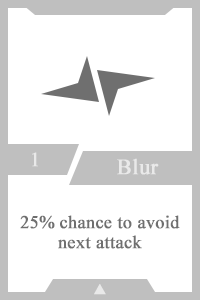
<style>
.page{position:relative;width:200px;height:300px;background:#ffffff}
.page>*{position:absolute;margin:0}
.t1{font:20px "TimesNewRomanPSMT";color:#e9e9e9;font-weight:bold}
.t2{font:22px "TimesNewRomanPSMT";color:#e9e9e9;font-weight:bold}
.t3{font:18px/20px "TimesNewRomanPSMT";color:#6f6f6f;font-weight:bold}
.t4{font:14px "AdobeHeitiStd-Regular";color:#e9e9e9;font-weight:bold}
</style>
<div class="page">
<p class="t1" style="left:32px;top:152px;width:6px;height:15px">1</p>
<p class="t2" style="left:117px;top:158px;width:42px;height:17px">Blur</p>
<p class="t3" style="left:20px;top:215px;width:160px;height:34px;text-align:center">25% chance to avoid next attack</p>
<p class="t4" style="left:94px;top:284px;width:12px;height:11px">▲</p>
</div>
